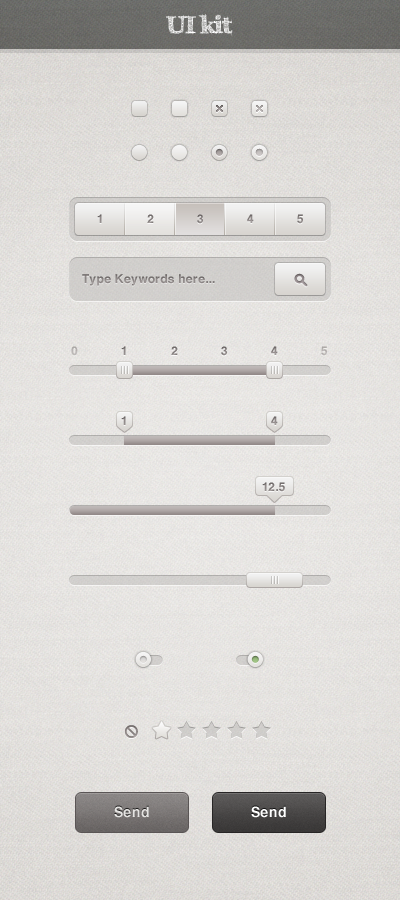
<style>
.page{position:relative;width:400px;height:900px}
.page>*{position:absolute;margin:0}
.t1{font:24px "FFFTusj-Bold";color:#ffffff}
.t2{font:12px "Helvetica-Bold";letter-spacing:0.025em;color:#908989}
.t3{font:12px "Helvetica-Bold";letter-spacing:0.025em}
.t4{font:12px "Helvetica-Bold";letter-spacing:0.025em;color:#847e7d}
.t5{font:12px "Helvetica-Bold";letter-spacing:0.025em;color:#908988}
.t6{font:12px "Helvetica-Bold";letter-spacing:0.025em;color:#817b7a}
.t7{font:12px "Helvetica-Bold";letter-spacing:0.025em;color:#8d8786}
.t8{font:12px "Helvetica-Bold";letter-spacing:0.025em;color:#aba3a2}
.t9{font:12px "Helvetica-Bold";letter-spacing:0.025em;color:#86807f}
.t10{font:14px "Helvetica-Bold";letter-spacing:0.025em;color:#e4e3e1}
.t11{font:14px "Helvetica-Bold";letter-spacing:0.025em;color:#ffffff}
</style>
<div class="page">
<p class="t1" style="left:166px;top:14px;width:67px;height:22px">UI kit</p>
<p class="t2" style="left:97px;top:214px;width:5px;height:9px">1</p>
<p class="t3" style="left:147px;top:214px;width:7px;height:9px">2</p>
<p class="t4" style="left:197px;top:214px;width:6px;height:10px">3</p>
<p class="t5" style="left:247px;top:214px;width:7px;height:9px">4</p>
<p class="t6" style="left:297px;top:214px;width:6px;height:10px">5</p>
<p class="t7" style="left:82px;top:274px;width:133px;height:12px">Type Keywords here...</p>
<p class="t8" style="left:71px;top:346px;width:7px;height:10px;opacity:0.5">0</p>
<p class="t2" style="left:121px;top:346px;width:5px;height:9px">1</p>
<p class="t3" style="left:171px;top:346px;width:7px;height:9px">2</p>
<p class="t4" style="left:221px;top:346px;width:6px;height:10px">3</p>
<p class="t5" style="left:271px;top:346px;width:7px;height:9px">4</p>
<p class="t8" style="left:321px;top:346px;width:6px;height:10px;opacity:0.5">5</p>
<p class="t2" style="left:121px;top:416px;width:5px;height:9px">1</p>
<p class="t5" style="left:271px;top:416px;width:7px;height:9px">4</p>
<p class="t9" style="left:262px;top:482px;width:23px;height:10px">12.5</p>
<p class="t10" style="left:114px;top:806px;width:35px;height:12px">Send</p>
<p class="t11" style="left:251px;top:806px;width:35px;height:12px">Send</p>
</div>
